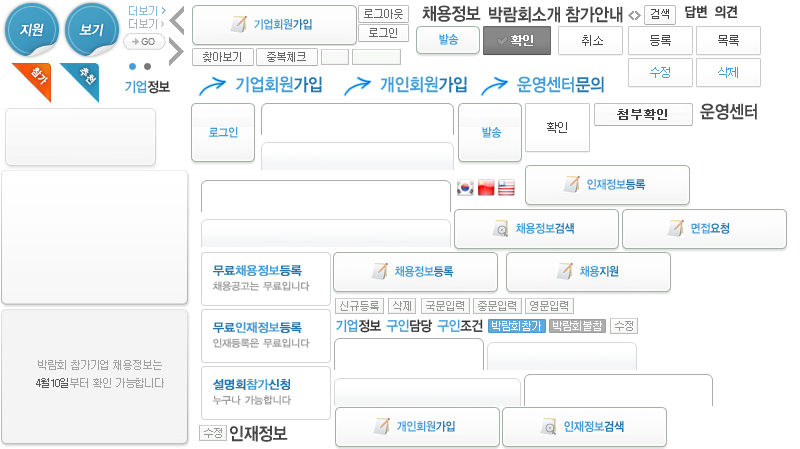
<style>
.page{position:relative;width:800px;height:449px;background:#ffffff}
.page>*{position:absolute;margin:0}
.t1{font:18px "YDIYGO140-KSCpc-EUC-H";letter-spacing:-0.1em;color:#454545;scale:0.9 1}
.t2{font:14px "YDIYGO130-KSCpc-EUC-H";letter-spacing:-0.1em;color:#3b3b3b;font-weight:bold;scale:0.9 1}
.t3{font:14px "YDIYGO130-KSCpc-EUC-H";letter-spacing:-0.1em;color:#ffffff;font-weight:bold;font-style:italic;scale:0.9 1}
.t4{font:12px "YDIYGO140-KSCpc-EUC-H";letter-spacing:-0.1em;color:#469ed9;scale:0.9 1}
.t5{font:12px "Dotum";letter-spacing:-0.1em;color:#454545}
.t6{font:10px "YDIYGO130-KSCpc-EUC-H";letter-spacing:-0.05em;color:#ffffff;font-weight:bold;scale:0.9 1}
.t7{font:18px "YDIYGO140-KSCpc-EUC-H";letter-spacing:-0.1em;color:#469ed9;scale:0.9 1}
.t8{font:18px "YDIYGO140-KSCpc-EUC-H";letter-spacing:-0.1em;color:#2479b2;scale:0.9 1}
.t9{font:12px "Dotum";letter-spacing:-0.1em;color:#469ed9}
.t10{font:14px "YDIYGO130-KSCpc-EUC-H";letter-spacing:-0.1em;color:#469ed9;scale:0.9 1}
.t11{font:14px "YDIYGO130-KSCpc-EUC-H";letter-spacing:-0.1em;color:#333333;scale:0.9 1}
.t12{font:12px "Dotum";color:#3e3c3e;font-weight:bold}
.t13{font:12px "YDIYGO140-KSCpc-EUC-H";letter-spacing:-0.1em;color:#2677ae;scale:0.9 1}
.t14{font:12px "YDIYGO130-KSCpc-EUC-H";letter-spacing:-0.1em;color:#469ed9;font-weight:bold}
.t15{font:12px "YDIYGO130-KSCpc-EUC-H";letter-spacing:-0.1em;color:#2476ad;font-weight:bold}
.t16{font:10px "YDIYGO130-KSCpc-EUC-H";letter-spacing:-0.1em;color:#a1a1a1;font-weight:bold}
.t17{font:11px "Dotum";letter-spacing:-0.1em;color:#969696}
.t18{font:11px "Dotum";letter-spacing:-0.1em;color:#ffffff}
.t19{font:12px "YDIYGO130-KSCpc-EUC-H";letter-spacing:-0.1em;color:#469ed9;font-weight:bold;scale:0.9 1}
.t20{font:12px "YDIYGO130-KSCpc-EUC-H";letter-spacing:-0.1em;color:#2677ae;font-weight:bold;scale:0.9 1}
</style>
<div class="page">
<p class="t1" style="left:422px;top:5px;width:59px;height:17px">채용정보</p>
<p class="t1" style="left:489px;top:6px;width:71px;height:17px">박람회소개</p>
<p class="t1" style="left:565px;top:6px;width:58px;height:17px">참가안내</p>
<p class="t2" style="left:685px;top:5px;width:22px;height:13px">답변</p>
<p class="t2" style="left:715px;top:5px;width:22px;height:14px">의견</p>
<p class="t3" style="left:20px;top:23px;width:24px;height:14px">지원</p>
<p class="t3" style="left:79px;top:23px;width:25px;height:14px">보기</p>
<p class="t4" style="left:439px;top:34px;width:20px;height:11px">발송</p>
<p class="t5" style="left:650px;top:35px;width:21px;height:11px">등록</p>
<p class="t5" style="left:718px;top:35px;width:21px;height:11px">목록</p>
<p class="t6" style="left:31px;top:67px;width:17px;height:18px;rotate:45deg">참가</p>
<p class="t6" style="left:79px;top:67px;width:18px;height:18px;rotate:45deg">추천</p>
<p class="t7" style="left:235px;top:76px;width:87px;height:17px">기업회원<span class="t8">가입</span></p>
<p class="t7" style="left:380px;top:76px;width:87px;height:17px">개인회원<span class="t8">가입</span></p>
<p class="t7" style="left:517px;top:76px;width:87px;height:17px">운영센터<span class="t8">문의</span></p>
<p class="t9" style="left:650px;top:67px;width:20px;height:11px">수정</p>
<p class="t9" style="left:718px;top:67px;width:20px;height:11px">삭제</p>
<p class="t10" style="left:125px;top:80px;width:45px;height:14px">기업<span class="t11">정보</span></p>
<p class="t12" style="left:617px;top:109px;width:50px;height:11px">첨부확인</p>
<p class="t1" style="left:700px;top:103px;width:57px;height:17px">운영센터</p>
<p class="t5" style="left:547px;top:122px;width:20px;height:11px">확인</p>
<p class="t4" style="left:209px;top:127px;width:29px;height:11px">로그인</p>
<p class="t4" style="left:482px;top:127px;width:20px;height:11px">발송</p>
<p class="t4" style="left:587px;top:179px;width:59px;height:11px">인재정보<span class="t13">등록</span></p>
<p class="t4" style="left:515px;top:223px;width:59px;height:11px">채용정보<span class="t13">검색</span></p>
<p class="t4" style="left:691px;top:223px;width:39px;height:11px">면접<span class="t13">요청</span></p>
<p class="t14" style="left:213px;top:265px;width:89px;height:11px"><span class="t15">무료</span>채용정보<span class="t15">등록</span></p>
<p class="t4" style="left:394px;top:266px;width:60px;height:11px">채용정보<span class="t13">등록</span></p>
<p class="t4" style="left:579px;top:266px;width:40px;height:11px">채용<span class="t13">지원</span></p>
<p class="t16" style="left:212px;top:281px;width:98px;height:10px">채용공고는 무료입니다</p>
<p class="t17" style="left:340px;top:301px;width:39px;height:10px">신규등록</p>
<p class="t17" style="left:426px;top:301px;width:38px;height:10px">국문입력</p>
<p class="t17" style="left:478px;top:301px;width:38px;height:10px">중문입력</p>
<p class="t17" style="left:530px;top:301px;width:38px;height:10px">영문입력</p>
<p class="t14" style="left:213px;top:322px;width:89px;height:11px"><span class="t15">무료</span>인재정보<span class="t15">등록</span></p>
<p class="t10" style="left:336px;top:319px;width:45px;height:14px">기업<span class="t11">정보</span></p>
<p class="t10" style="left:386px;top:319px;width:47px;height:14px">구인<span class="t11">담당</span></p>
<p class="t10" style="left:437px;top:319px;width:46px;height:14px">구인<span class="t11">조건</span></p>
<p class="t18" style="left:492px;top:321px;width:49px;height:10px">박람회참가</p>
<p class="t18" style="left:553px;top:321px;width:49px;height:10px">박람회불참</p>
<p class="t16" style="left:213px;top:338px;width:97px;height:10px">인재등록은 무료입니다</p>
<p class="t15" style="left:213px;top:379px;width:77px;height:11px">설명회<span class="t14">참가</span>신청</p>
<p class="t16" style="left:212px;top:395px;width:79px;height:10px">누구나 가능합니다</p>
<p class="t1" style="left:230px;top:425px;width:58px;height:17px">인재정보</p>
<p class="t4" style="left:397px;top:421px;width:58px;height:11px">개인회원<span class="t13">가입</span></p>
<p class="t19" style="left:564px;top:421px;width:60px;height:11px">인재정보<span class="t20">검색</span></p>
</div>
